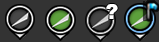
<style>
.page{position:relative;width:159px;height:42px;background:#333333}
.page>*{position:absolute;margin:0}
.t1{font:20.6px "Arial-Black";letter-spacing:0.03em;color:#ffffff}
</style>
<div class="page">
<p class="t1" style="left:106px;top:4px;width:12px;height:15px">?</p>
</div>
